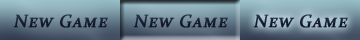
<style>
.page{position:relative;width:360px;height:40px}
.page>*{position:absolute;margin:0}
.t1{font:18px "Constantia";letter-spacing:0.025em;color:#161d32;font-variant:small-caps;font-weight:bold;font-style:italic}
</style>
<div class="page">
<p class="t1" style="left:13px;top:14px;width:95px;height:14px">New Game</p>
<p class="t1" style="left:133px;top:14px;width:95px;height:14px">New Game</p>
<p class="t1" style="left:253px;top:14px;width:95px;height:14px">New Game</p>
</div>
